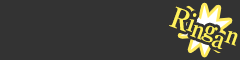
<style>
.page{position:relative;width:240px;height:60px;background:#333333}
.page>*{position:absolute;margin:0}
.t1{font:25.2px "RyuminPro-ExBold";letter-spacing:-0.08em;color:#fff15b;scale:0.9 1}
.t2{font:28px "RyuminPro-ExBold";letter-spacing:-0.08em;color:#fff15b;scale:0.9 1}
</style>
<div class="page">
<p class="t1" style="left:169px;top:6px;width:69px;height:43px;rotate:20deg"><span class="t2">R</span>ingan</p>
</div>
